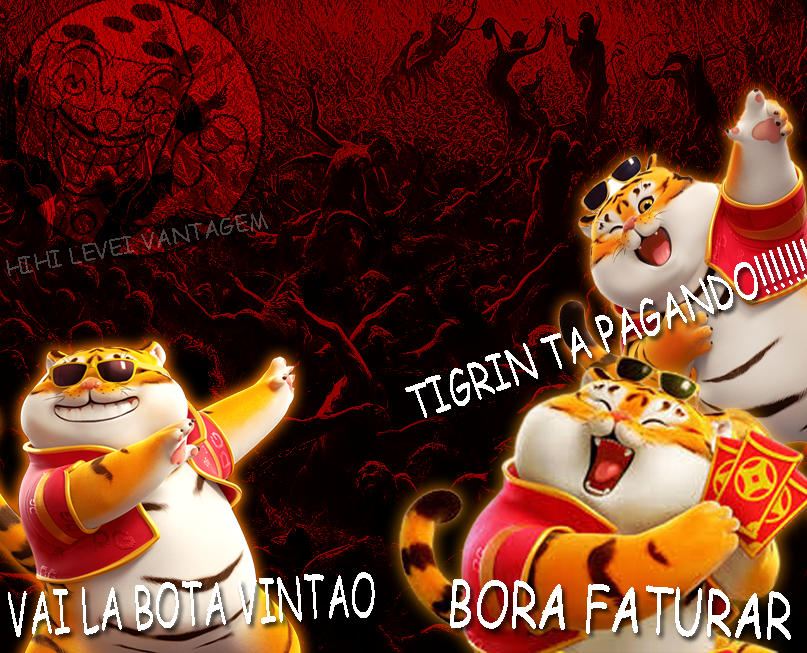
<style>
.page{position:relative;width:807px;height:653px}
.page>*{position:absolute;margin:0}
.t1{font:22.7px "ComicSansMS";color:#4b4444}
.t2{font:59.6px "ComicSansMS";color:#ffffff;scale:0.56 1}
.t3{font:63.8px "ComicSansMS";color:#ffffff;scale:0.69 1}
</style>
<div class="page">
<p class="t1" style="left:6px;top:211px;width:262px;height:65px;rotate:-11deg">HIHI LEVEI VANTAGEM</p>
<p class="t2" style="left:8px;top:572px;width:367px;height:65px;rotate:-3deg">VAI LA BOTA VINTAO</p>
<p class="t3" style="left:450px;top:579px;width:341px;height:61px;rotate:2deg">BORA FATURAR</p>
</div>
